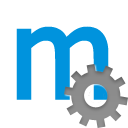
<style>
.page{position:relative;width:128px;height:128px;background:#ffffff}
.page>*{position:absolute;margin:0}
.t1{font:124px "Tahoma";color:#0093dd;font-weight:bold}
</style>
<div class="page">
<p class="t1" style="left:16px;top:26px;width:93px;height:74px">m</p>
</div>
